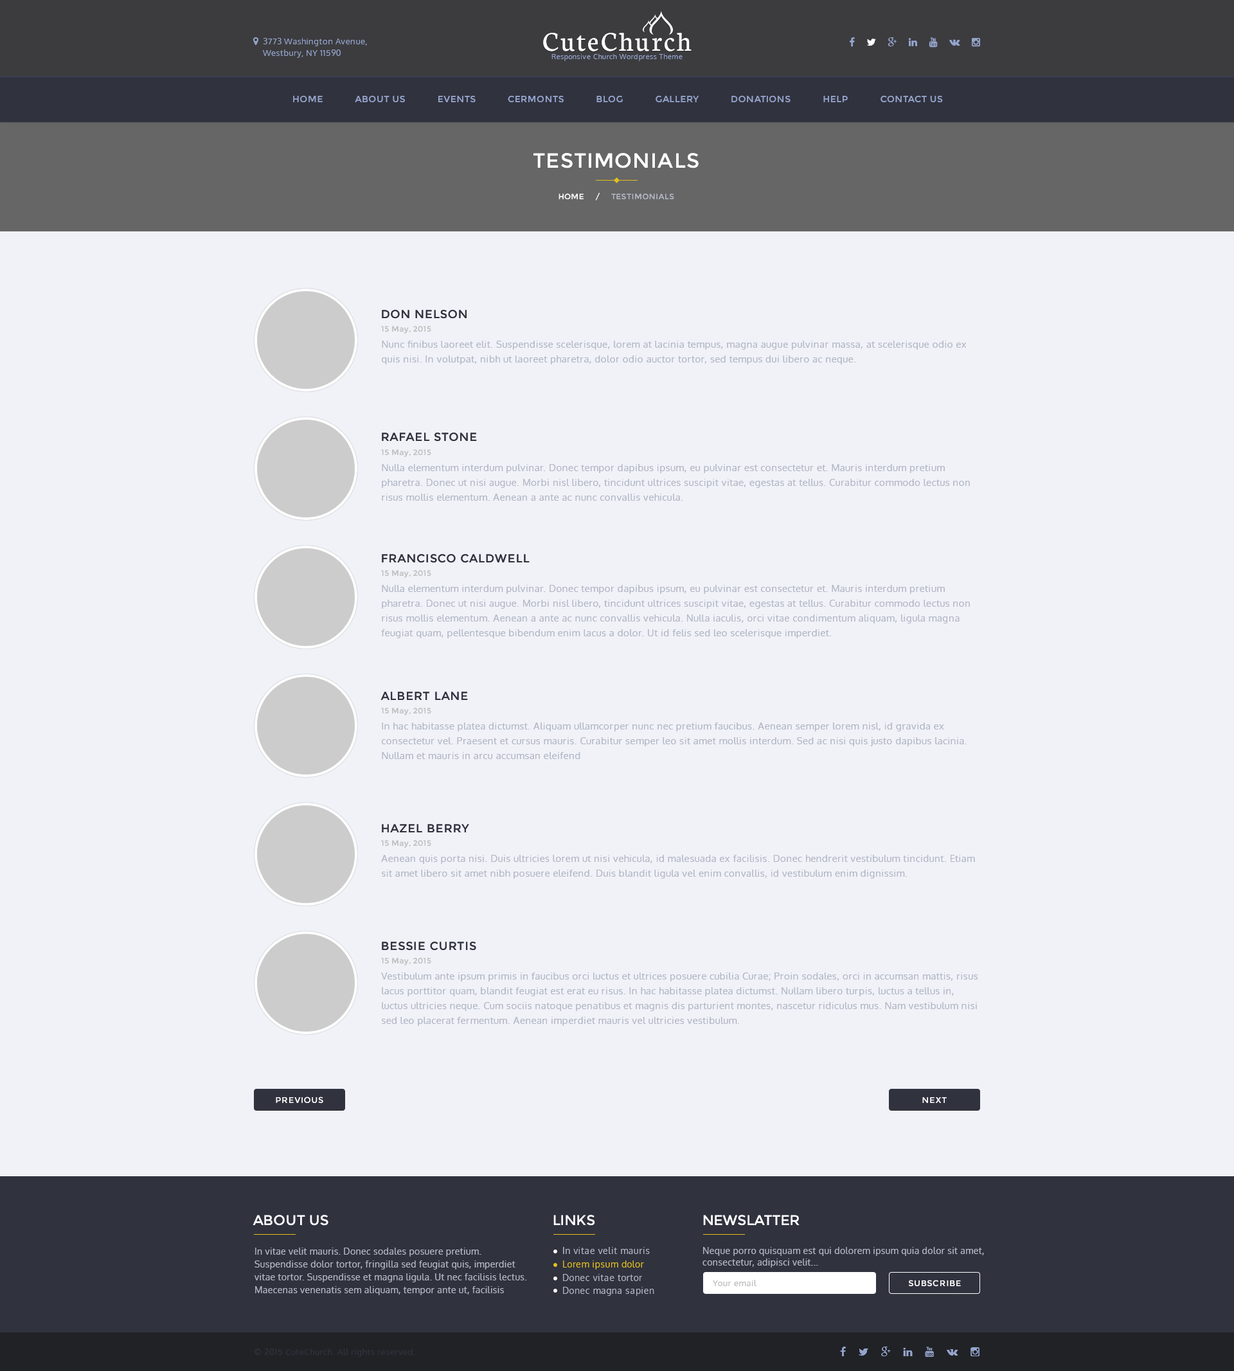
<style>
.page{position:relative;width:1234px;height:1371px;background:#f0f2f8}
.page>*{position:absolute;margin:0}
.t1{font:28.9px "Neuton-Regular";letter-spacing:0.07em;color:#ffffff}
.t2{font:7.1px "Oxygen-Regular";letter-spacing:0.05em;color:#95a4cc}
.t3{font:9px "Montserrat-Regular";letter-spacing:0.035em;color:#96a5cd;text-transform:uppercase}
.t4{font:20.6px "Montserrat-Regular";letter-spacing:0.035em;color:#ffffff;text-transform:uppercase}
.t5{font:7.7px "Montserrat-Regular";letter-spacing:0.035em;color:#b3b8c5;text-transform:uppercase}
.t6{font:7.7px "Montserrat-Regular";letter-spacing:0.035em;color:#ffffff;text-transform:uppercase}
.t7{font:11.6px "Montserrat-Regular";letter-spacing:0.05em;color:#30323e;text-transform:uppercase}
.t8{font:7.7px "Montserrat-Regular";letter-spacing:0.03em;color:#bfbfbf}
.t9{font:9.6px/14.8px "Oxygen-Regular";letter-spacing:0.025em;color:#b2b7c4}
.t10{font:8.4px "Montserrat-Regular";letter-spacing:0.05em;color:#ffffff;text-transform:uppercase}
.t11{font:14.1px "Montserrat-Regular";color:#ffffff;text-transform:uppercase}
.t12{font:9px/12.9px "Oxygen-Regular";letter-spacing:0.03em;color:#b2b7c4}
.t13{font:9px "Oxygen-Regular";letter-spacing:0.03em;color:#b2b7c4}
.t14{font:9px/11.6px "Oxygen-Regular";letter-spacing:0.03em;color:#b2b7c4}
.t15{font:9px "Oxygen-Regular";letter-spacing:0.03em;color:#e2bf1d}
.t16{font:8.4px "Oxygen-Regular";letter-spacing:0.05em;color:#b8b8b8}
.t17{font:8.4px "Oxygen-Regular";letter-spacing:0.05em;color:#30323e}
</style>
<div class="page">
<p class="t1" style="left:543px;top:33px;width:149px;height:18px">CuteChurch</p>
<p class="t2" style="left:552px;top:54px;width:131px;height:7px">Responsive Church Wordpress Theme</p>
<p class="t3" style="left:293px;top:96px;width:650px;height:7px">Home           About Us           Events           Cermonts           Blog           Gallery           Donations           Help           Contact Us</p>
<p class="t4" style="left:534px;top:153px;width:165px;height:15px">Testimonials</p>
<p class="t5" style="left:559px;top:193px;width:115px;height:8px"><span class="t6">Home     /     </span>testimonials</p>
<p class="t7" style="left:382px;top:310px;width:85px;height:9px">Don Nelson</p>
<p class="t8" style="left:381px;top:326px;width:50px;height:8px">15 May, 2015</p>
<p class="t9" style="left:382px;top:341px;width:585px;height:23px">Nunc finibus laoreet elit. Suspendisse scelerisque, lorem at lacinia tempus, magna augue pulvinar massa, at scelerisque odio ex quis nisi. In volutpat, nibh ut laoreet pharetra, dolor odio auctor tortor, sed tempus dui libero ac neque.</p>
<p class="t7" style="left:382px;top:433px;width:95px;height:9px">Rafael Stone</p>
<p class="t8" style="left:381px;top:449px;width:50px;height:8px">15 May, 2015</p>
<p class="t9" style="left:382px;top:464px;width:588px;height:37px">Nulla elementum interdum pulvinar. Donec tempor dapibus ipsum, eu pulvinar est consectetur et. Mauris interdum pretium pharetra. Donec ut nisi augue. Morbi nisl libero, tincidunt ultrices suscipit vitae, egestas at tellus. Curabitur commodo lectus non risus mollis elementum. Aenean a ante ac nunc convallis vehicula.</p>
<p class="t7" style="left:382px;top:554px;width:148px;height:9px">Francisco Caldwell</p>
<p class="t8" style="left:381px;top:570px;width:50px;height:8px">15 May, 2015</p>
<p class="t9" style="left:381px;top:585px;width:589px;height:53px">Nulla elementum interdum pulvinar. Donec tempor dapibus ipsum, eu pulvinar est consectetur et. Mauris interdum pretium pharetra. Donec ut nisi augue. Morbi nisl libero, tincidunt ultrices suscipit vitae, egestas at tellus. Curabitur commodo lectus non risus mollis elementum. Aenean a ante ac nunc convallis vehicula. Nulla iaculis, orci vitae condimentum aliquam, ligula magna feugiat quam, pellentesque bibendum enim lacus a dolor. Ut id felis sed leo scelerisque imperdiet.</p>
<p class="t7" style="left:381px;top:692px;width:87px;height:8px">Albert Lane</p>
<p class="t8" style="left:381px;top:708px;width:50px;height:8px">15 May, 2015</p>
<p class="t9" style="left:382px;top:723px;width:585px;height:36px">In hac habitasse platea dictumst. Aliquam ullamcorper nunc nec pretium faucibus. Aenean semper lorem nisl, id gravida ex consectetur vel. Praesent et cursus mauris. Curabitur semper leo sit amet mollis interdum. Sed ac nisi quis justo dapibus lacinia. Nullam et mauris in arcu accumsan eleifend</p>
<p class="t7" style="left:382px;top:824px;width:87px;height:9px">Hazel Berry</p>
<p class="t8" style="left:381px;top:840px;width:50px;height:8px">15 May, 2015</p>
<p class="t9" style="left:381px;top:855px;width:594px;height:24px">Aenean quis porta nisi. Duis ultricies lorem ut nisi vehicula, id malesuada ex facilisis. Donec hendrerit vestibulum tincidunt. Etiam sit amet libero sit amet nibh posuere eleifend. Duis blandit ligula vel enim convallis, id vestibulum enim dignissim.</p>
<p class="t7" style="left:382px;top:942px;width:94px;height:9px">Bessie Curtis</p>
<p class="t8" style="left:381px;top:958px;width:50px;height:8px">15 May, 2015</p>
<p class="t9" style="left:381px;top:973px;width:597px;height:53px">Vestibulum ante ipsum primis in faucibus orci luctus et ultrices posuere cubilia Curae; Proin sodales, orci in accumsan mattis, risus lacus porttitor quam, blandit feugiat est erat eu risus. In hac habitasse platea dictumst. Nullam libero turpis, luctus a tellus in, luctus ultricies neque. Cum sociis natoque penatibus et magnis dis parturient montes, nascetur ridiculus mus. Nam vestibulum nisi sed leo placerat fermentum. Aenean imperdiet mauris vel ultricies vestibulum.</p>
<p class="t10" style="left:276px;top:1097px;width:47px;height:7px">Previous</p>
<p class="t10" style="left:923px;top:1097px;width:24px;height:6px">next</p>
<p class="t11" style="left:253px;top:1215px;width:75px;height:11px">about us</p>
<p class="t11" style="left:554px;top:1215px;width:41px;height:11px">links</p>
<p class="t11" style="left:703px;top:1215px;width:97px;height:11px">newslatter</p>
<p class="t12" style="left:254px;top:1248px;width:273px;height:47px">In vitae velit mauris. Donec sodales posuere pretium. Suspendisse dolor tortor, fringilla sed feugiat quis, imperdiet vitae tortor. Suspendisse et magna ligula. Ut nec facilisis lectus. Maecenas venenatis sem aliquam, tempor ante ut, facilisis ipsum. Aenean finibus justo et odio lobortis feugiat. In vulputate lacinia ex sit amet molestie.</p>
<p class="t13" style="left:563px;top:1247px;width:87px;height:7px">In vitae velit mauris</p>
<p class="t14" style="left:703px;top:1247px;width:281px;height:21px">Neque porro quisquam est qui dolorem ipsum quia dolor sit amet, <br>consectetur, adipisci velit...</p>
<p class="t15" style="left:563px;top:1261px;width:81px;height:9px">Lorem ipsum dolor</p>
<p class="t13" style="left:563px;top:1274px;width:79px;height:7px">Donec vitae tortor</p>
<p class="t13" style="left:563px;top:1287px;width:91px;height:9px">Donec magna sapien</p>
<p class="t16" style="left:713px;top:1280px;width:44px;height:6px">Your email</p>
<p class="t10" style="left:908px;top:1280px;width:53px;height:7px">subscribe</p>
<p class="t17" style="left:254px;top:1349px;width:161px;height:8px">© 2015 CuteChurch. All rights reserved.</p>
</div>
